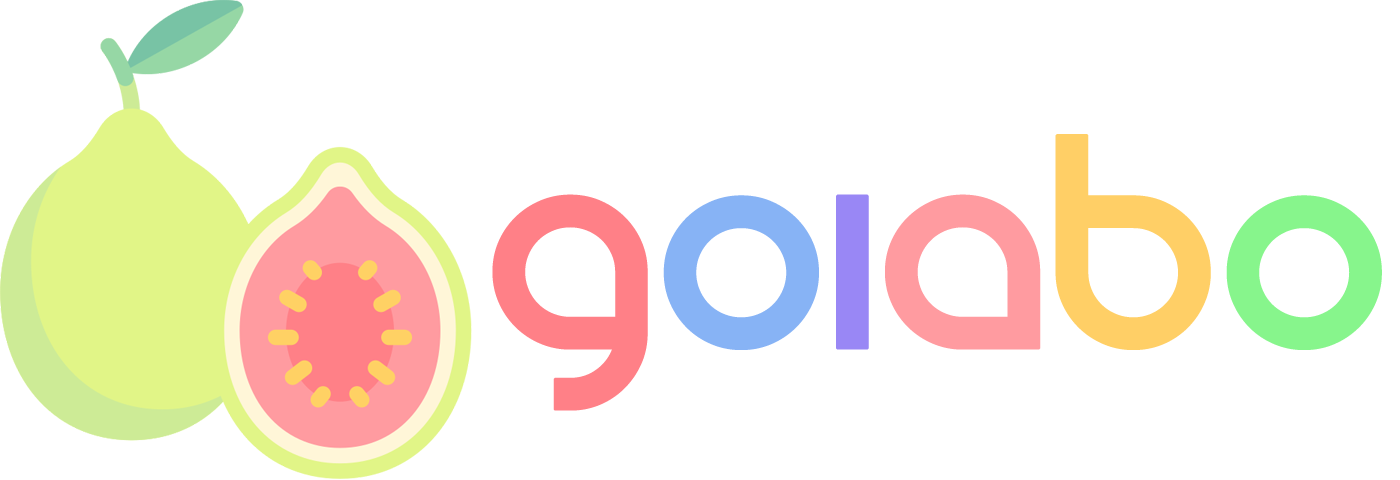
<style>
.page{position:relative;width:1400px;height:480px;background:#ffffff}
.page>*{position:absolute;margin:0}
.t1{font:339.5px "REZ";color:#ff8087;font-weight:bold}
.t2{font:339.5px "REZ";color:#87b3f5;font-weight:bold}
.t3{font:339.5px "REZ";color:#9987f5;font-weight:bold}
.t4{font:339.5px "REZ";color:#ff9ba0;font-weight:bold}
.t5{font:339.5px "REZ";color:#ffcf66;font-weight:bold}
.t6{font:339.5px "REZ";color:#87f58c;font-weight:bold}
</style>
<div class="page">
<p class="t1" style="left:492px;top:134px;width:890px;height:277px">g<span class="t2">o</span><span class="t3">i</span><span class="t4">a</span><span class="t5">b</span><span class="t6">o</span></p>
</div>
